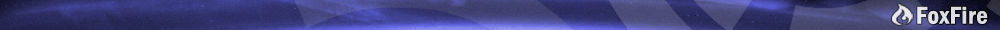
<style>
.page{position:relative;width:1000px;height:30px}
.page>*{position:absolute;margin:0}
.t1{font:25px "FranklinGothic-DemiCond";letter-spacing:0.025em;color:#dddee3}
</style>
<div class="page">
<p class="t1" style="left:917px;top:6px;width:71px;height:18px">FoxFire</p>
</div>
